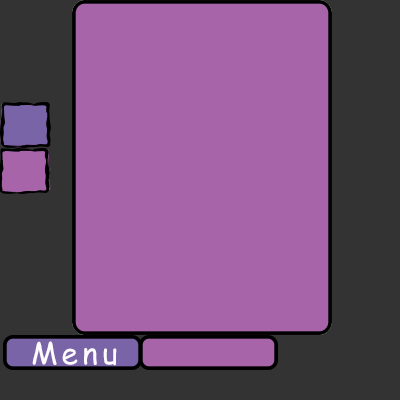
<style>
.page{position:relative;width:400px;height:400px;background:#a864a8}
.page>*{position:absolute;margin:0}
.t1{font:30px "ComicSansMS";letter-spacing:0.14em;color:#fefcfe}
</style>
<div class="page">
<p class="t1" style="left:32px;top:341px;width:85px;height:25px">Menu</p>
</div>
